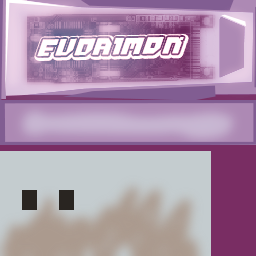
<style>
.page{position:relative;width:256px;height:256px}
.page>*{position:absolute;margin:0}
.t1{font:22.9px "Pixel-Regular";color:#ffffff;text-transform:uppercase;font-weight:bold}
</style>
<div class="page">
<p class="t1" style="left:37px;top:37px;width:147px;height:19px;rotate:-1deg">eudaimon</p>
</div>
